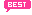
<style>
.page{position:relative;width:32px;height:15px;background:#ffffff}
.page>*{position:absolute;margin:0}
.t1{font:8px "Hooge0555";color:#ffffff}
</style>
<div class="page">
<p class="t1" style="left:8px;top:2px;width:18px;height:5px">BEST</p>
</div>
